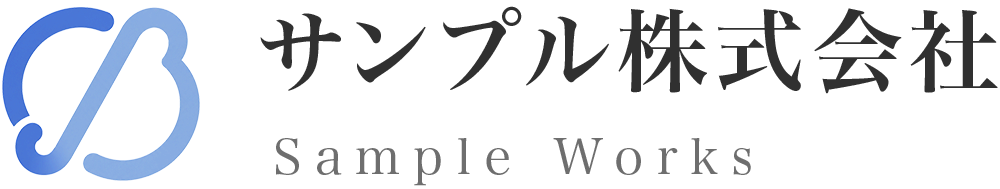
<style>
.page{position:relative;width:1000px;height:189px;background:#ffffff}
.page>*{position:absolute;margin:0}
.t1{font:90.7px "HiraMinPro-W6";letter-spacing:0.075em;color:#303030}
.t2{font:50.4px "HiraMinPro-W3";letter-spacing:0.255em;color:#6e6e6e}
</style>
<div class="page">
<p class="t1" style="left:260px;top:6px;width:738px;height:88px">サンプル株式会社</p>
<p class="t2" style="left:276px;top:138px;width:475px;height:48px">Sample Works</p>
</div>
